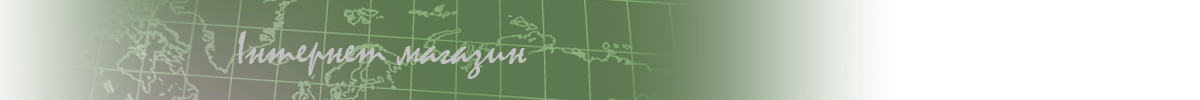
<style>
.page{position:relative;width:1200px;height:100px;background:#ffffff}
.page>*{position:absolute;margin:0}
.t1{font:48px "Mistral";color:#c0c0c0}
</style>
<div class="page">
<p class="t1" style="left:238px;top:31px;width:289px;height:48px">Інтернет магазин</p>
</div>
